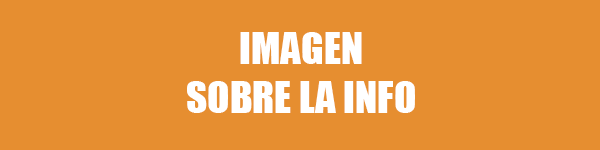
<style>
.page{position:relative;width:600px;height:150px;background:#e68e30}
.page>*{position:absolute;margin:0}
.t1{font:41px "Impact";color:#ffffff}
</style>
<div class="page">
<p class="t1" style="left:187px;top:32px;width:228px;height:81px;text-align:center">IMAGEN<br>SOBRE LA INFO</p>
</div>
